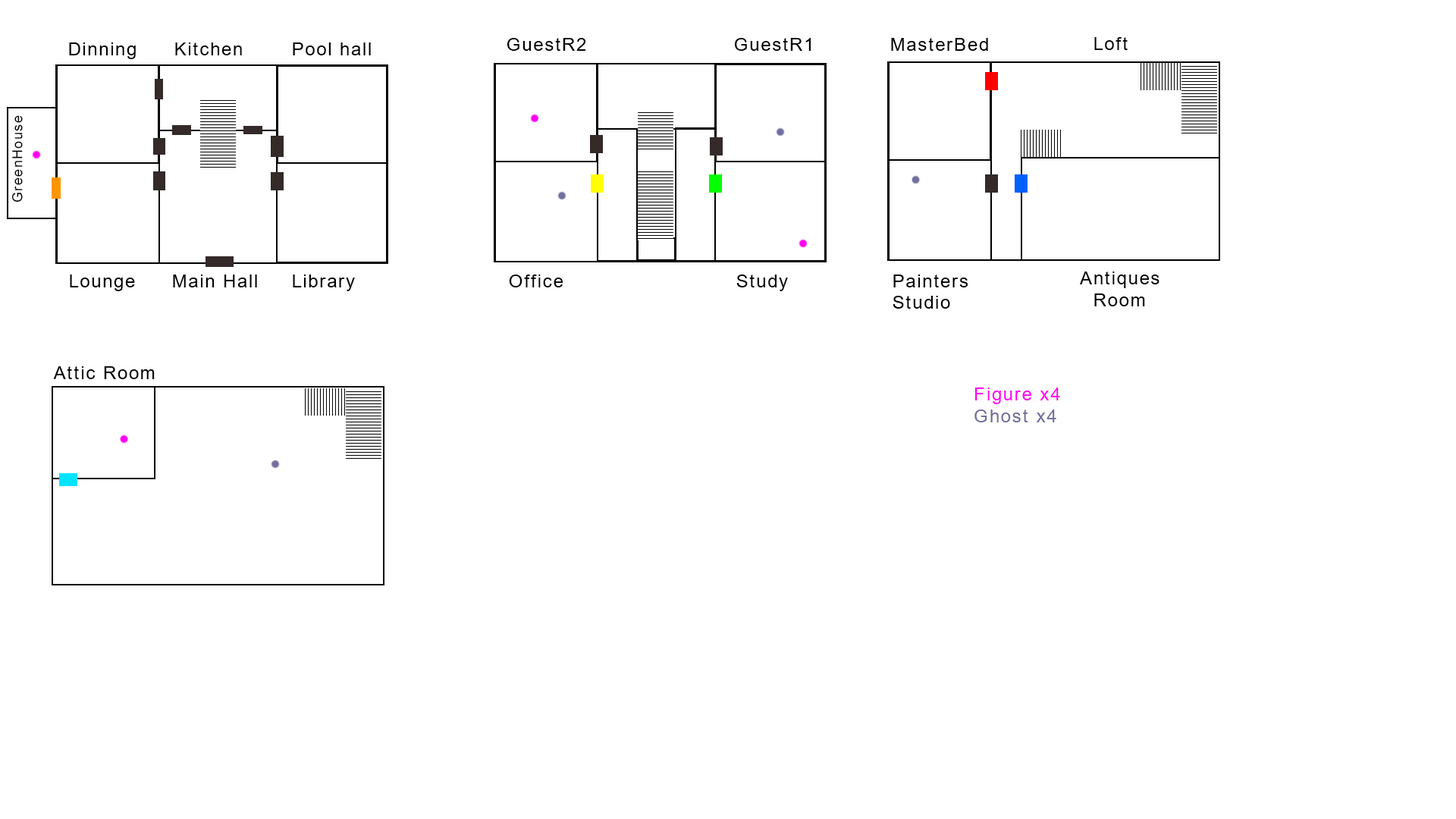
<style>
.page{position:relative;width:1456px;height:819px;background:#ffffff}
.page>*{position:absolute;margin:0}
.t1{font:18.2px "ArialMT";letter-spacing:0.08em;color:#000000}
.t2{font:13.6px "ArialMT";letter-spacing:0.08em;color:#000000}
.t3{font:18.2px "ArialMT";letter-spacing:0.08em;color:#ff00f0}
.t4{font:18.2px "ArialMT";letter-spacing:0.08em;color:#726e9e}
</style>
<div class="page">
<p class="t1" style="left:507px;top:38px;width:78px;height:13px">GuestR2</p>
<p class="t1" style="left:735px;top:38px;width:76px;height:13px">GuestR1</p>
<p class="t1" style="left:891px;top:38px;width:97px;height:13px">MasterBed</p>
<p class="t1" style="left:1094px;top:37px;width:34px;height:13px">Loft</p>
<p class="t1" style="left:69px;top:42px;width:67px;height:17px">Dinning</p>
<p class="t1" style="left:175px;top:42px;width:67px;height:13px">Kitchen</p>
<p class="t1" style="left:293px;top:42px;width:78px;height:13px">Pool hall</p>
<p class="t2" style="left:11px;top:115px;width:12px;height:87px;rotate:-90deg">GreenHouse</p>
<p class="t1" style="left:70px;top:275px;width:65px;height:16px">Lounge</p>
<p class="t1" style="left:173px;top:275px;width:84px;height:12px">Main Hall</p>
<p class="t1" style="left:293px;top:275px;width:62px;height:16px">Library</p>
<p class="t1" style="left:509px;top:275px;width:54px;height:12px">Office</p>
<p class="t1" style="left:736px;top:275px;width:52px;height:16px">Study</p>
<p class="t1" style="left:893px;top:275px;width:75px;height:34px">Painters<br>Studio</p>
<p class="t1" style="left:1080px;top:271px;width:79px;height:35px">Antiques<br>  Room</p>
<p class="t1" style="left:53px;top:366px;width:102px;height:13px">Attic Room</p>
<p class="t3" style="left:974px;top:388px;width:86px;height:34px">Figure x4<br><span class="t4">Ghost x4</span></p>
</div>
